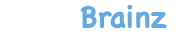
<style>
.page{position:relative;width:180px;height:34px;background:#ffffff}
.page>*{position:absolute;margin:0}
.t1{font:30px "ChalkboardSE-Bold";color:#64a9df}
</style>
<div class="page">
<p class="t1" style="left:80px;top:4px;width:87px;height:25px">Brainz</p>
</div>
